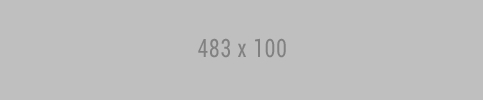
<style>
.page{position:relative;width:483px;height:100px;background:#bfbfbf}
.page>*{position:absolute;margin:0}
.t1{font:25px "Roboto-Condensed";letter-spacing:0.07em;color:#818181;scale:0.8 1}
</style>
<div class="page">
<p class="t1" style="left:198px;top:38px;width:88px;height:20px">483 x 100</p>
</div>
